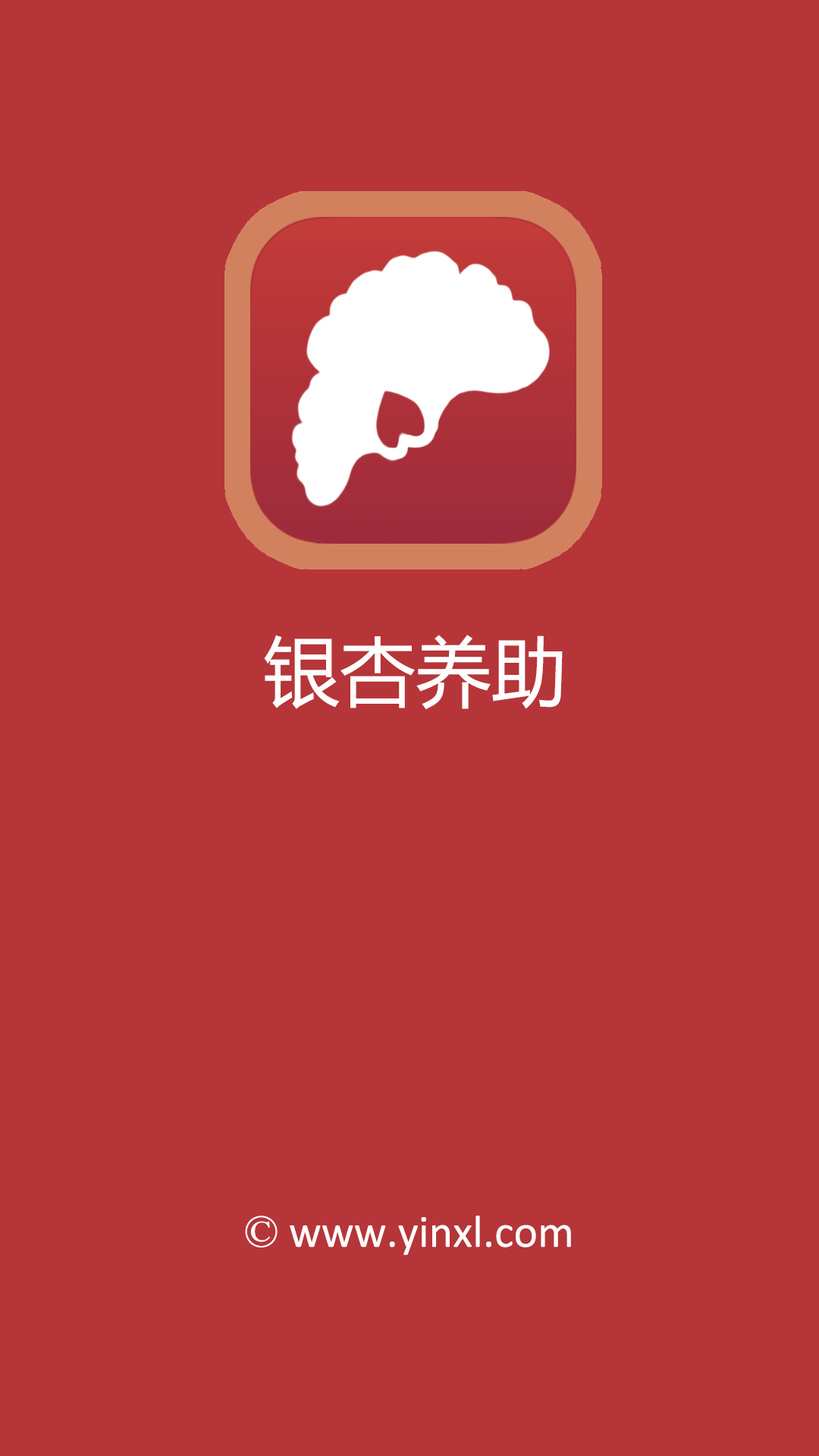
<style>
.page{position:relative;width:819px;height:1456px;background:#b63539}
.page>*{position:absolute;margin:0}
.t1{font:75.8px "MicrosoftYaHei";color:#fefefe}
.t2{font:45.5px "Calibri";color:#fefefe}
.t3{font:45.5px "IskoolaPota";color:#fefefe}
</style>
<div class="page">
<p class="t1" style="left:264px;top:635px;width:299px;height:75px">银杏养助</p>
<p class="t2" style="left:245px;top:1216px;width:326px;height:39px"><span class="t3">©</span> www.yinxl.com</p>
</div>
